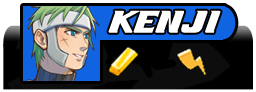
<style>
.page{position:relative;width:256px;height:92px;background:#000000}
.page>*{position:absolute;margin:0}
.t1{font:24px "-Xenogears";letter-spacing:0.05em;color:#ffffff}
</style>
<div class="page">
<p class="t1" style="left:108px;top:10px;width:113px;height:23px">KENJI</p>
</div>
